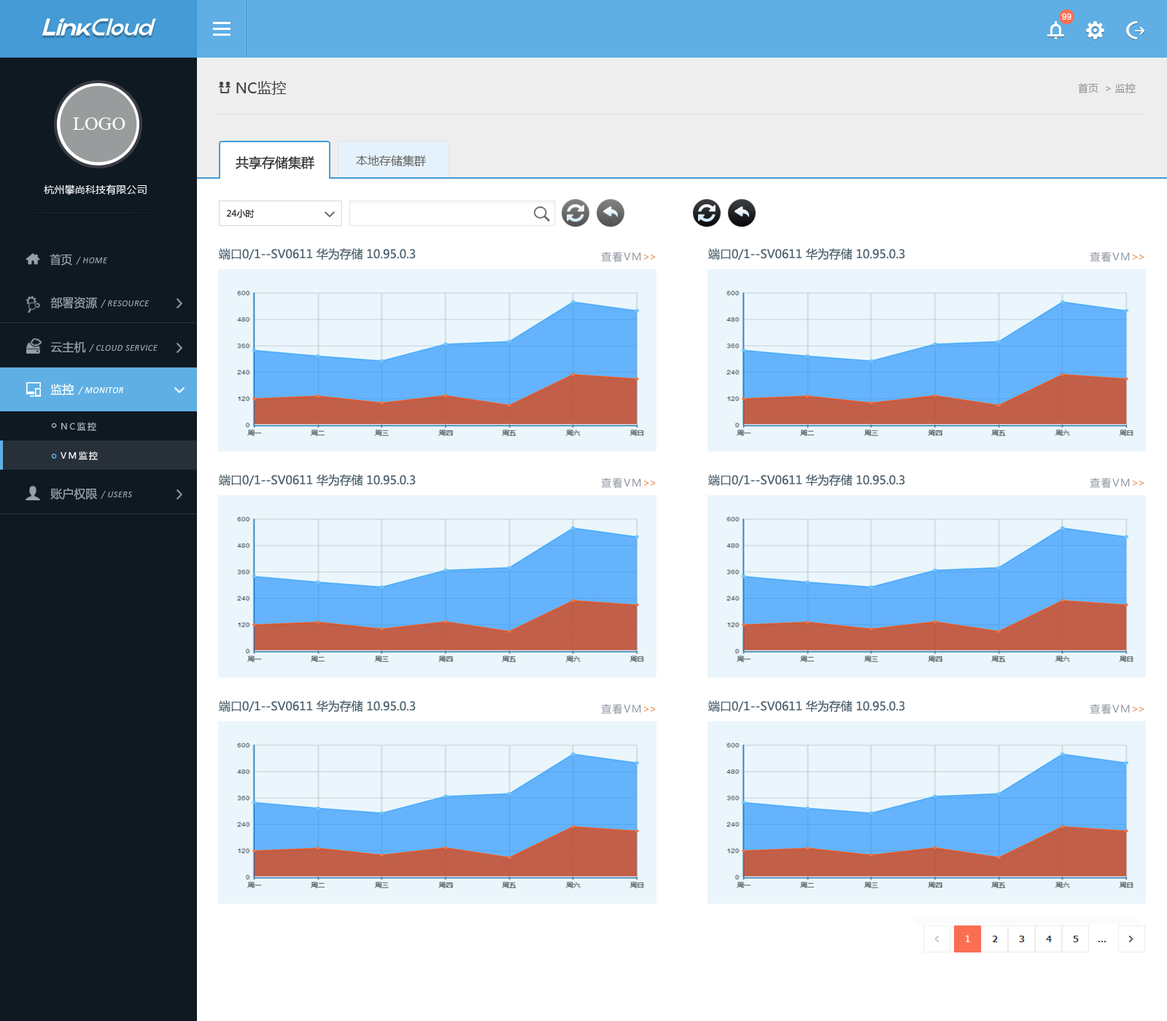
<style>
.page{position:relative;width:1167px;height:1021px;background:#ffffff}
.page>*{position:absolute;margin:0}
.t1{font:8.8px "ArialMT";color:#ffffff}
.t2{font:14.6px "MicrosoftYaHei";color:#444444}
.t3{font:10.2px "MicrosoftYaHei";color:#999999}
.t4{font:19px "TimesNewRomanPSMT";color:#ffffff}
.t5{font:13.1px "MicrosoftYaHei";color:#333333}
.t6{font:11.7px "MicrosoftYaHei";color:#666666}
.t7{font:10.2px "MicrosoftYaHei";letter-spacing:0.01em;color:#ffffff}
.t8{font:8.8px "MicrosoftYaHei";color:#333333}
.t9{font:11.7px "MicrosoftYaHei";color:#95a0aa;scale:0.96 1}
.t10{font:8.8px "Calibri-Italic";letter-spacing:0.05em;color:#95a0aa}
.t11{font:11.7px "MicrosoftYaHei";color:#506470}
.t12{font:10.2px "MicrosoftYaHei";letter-spacing:0.1em;color:#9097a1}
.t13{font:10.2px "MicrosoftYaHei";letter-spacing:-0.1em;color:#ef8748}
.t14{font:11.7px "MicrosoftYaHei";color:#95a0aa}
.t15{font:8.8px "Calibri-Italic";letter-spacing:0.05em;color:#95a0aa;text-transform:uppercase}
.t16{font:11.7px "MicrosoftYaHei";color:#ffffff}
.t17{font:8.8px "Calibri-Italic";letter-spacing:0.05em;color:#ffffff;text-transform:uppercase}
.t18{font:8.8px "Calibri-Italic";letter-spacing:0.05em;color:#ffffff}
.t19{font:8.8px/29.2px "MicrosoftYaHei";letter-spacing:0.2em;color:#b0bdc4}
.t20{font:8.8px/29.2px "MicrosoftYaHei";letter-spacing:0.2em;color:#ffffff}
</style>
<div class="page">
<p class="t1" style="left:1062px;top:13px;width:10px;height:7px">99</p>
<p class="t2" style="left:236px;top:81px;width:51px;height:14px">NC监控</p>
<p class="t3" style="left:1078px;top:83px;width:58px;height:10px">首页  &gt; 监控</p>
<p class="t4" style="left:73px;top:117px;width:52px;height:13px">LOGO</p>
<p class="t5" style="left:236px;top:156px;width:78px;height:13px">共享存储集群</p>
<p class="t6" style="left:356px;top:155px;width:70px;height:12px">本地存储集群</p>
<p class="t7" style="left:44px;top:185px;width:103px;height:11px">杭州攀尚科技有限公司</p>
<p class="t8" style="left:227px;top:209px;width:28px;height:9px">24小时</p>
<p class="t9" style="left:50px;top:254px;width:22px;height:12px">首页</p>
<p class="t10" style="left:76px;top:257px;width:32px;height:8px">/ HOME</p>
<p class="t11" style="left:219px;top:248px;width:197px;height:12px">端口0/1--SV0611 华为存储 10.95.0.3</p>
<p class="t12" style="left:601px;top:252px;width:55px;height:10px">查看VM<span class="t13">&gt;&gt;</span></p>
<p class="t11" style="left:708px;top:248px;width:197px;height:12px">端口0/1--SV0611 华为存储 10.95.0.3</p>
<p class="t12" style="left:1090px;top:252px;width:55px;height:10px">查看VM<span class="t13">&gt;&gt;</span></p>
<p class="t14" style="left:50px;top:297px;width:48px;height:12px">部署资源</p>
<p class="t15" style="left:101px;top:300px;width:49px;height:8px"><span class="t10">/ </span>resource</p>
<p class="t14" style="left:50px;top:341px;width:36px;height:12px">云主机</p>
<p class="t15" style="left:89px;top:344px;width:69px;height:8px"><span class="t10">/ </span>cloud service</p>
<p class="t16" style="left:50px;top:384px;width:24px;height:11px">监控</p>
<p class="t17" style="left:78px;top:387px;width:46px;height:8px"><span class="t18">/ </span>monitor</p>
<p class="t19" style="left:61px;top:422px;width:37px;height:38px">NC监控<br><span class="t20">VM监控<br></span>基础资源</p>
<p class="t11" style="left:219px;top:474px;width:197px;height:13px">端口0/1--SV0611 华为存储 10.95.0.3</p>
<p class="t12" style="left:601px;top:478px;width:55px;height:10px">查看VM<span class="t13">&gt;&gt;</span></p>
<p class="t11" style="left:708px;top:474px;width:197px;height:13px">端口0/1--SV0611 华为存储 10.95.0.3</p>
<p class="t12" style="left:1090px;top:478px;width:55px;height:10px">查看VM<span class="t13">&gt;&gt;</span></p>
<p class="t14" style="left:50px;top:488px;width:48px;height:12px">账户权限</p>
<p class="t15" style="left:101px;top:491px;width:31px;height:8px"><span class="t10">/ </span>users</p>
<p class="t11" style="left:219px;top:700px;width:197px;height:13px">端口0/1--SV0611 华为存储 10.95.0.3</p>
<p class="t11" style="left:708px;top:700px;width:197px;height:13px">端口0/1--SV0611 华为存储 10.95.0.3</p>
<p class="t12" style="left:601px;top:704px;width:55px;height:10px">查看VM<span class="t13">&gt;&gt;</span></p>
<p class="t12" style="left:1090px;top:704px;width:55px;height:10px">查看VM<span class="t13">&gt;&gt;</span></p>
</div>
